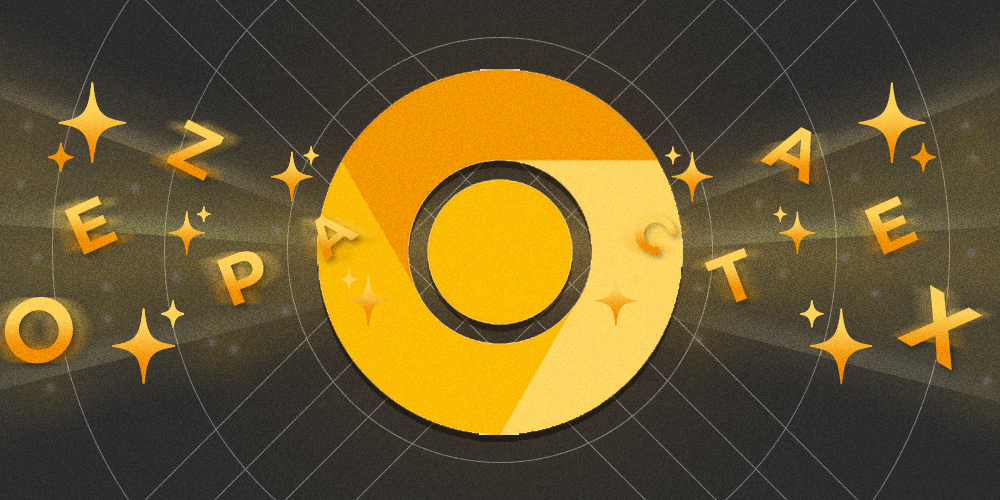
<style>
.page{position:relative;width:1000px;height:500px}
.page>*{position:absolute;margin:0}
.t1{font:68.5px "Montserrat-Bold"}
.t2{font:68.7px "Montserrat-Bold"}
.t3{font:68.8px "Montserrat-Bold"}
.t4{font:54.5px "Montserrat-Bold"}
.t5{font:69px "Montserrat-Bold"}
.t6{font:89.4px "Montserrat-Bold"}
</style>
<div class="page">
<p class="t1" style="left:166px;top:119px;width:59px;height:62px;rotate:27deg">Z</p>
<p class="t2" style="left:760px;top:127px;width:51px;height:58px;rotate:26deg">A</p>
<p class="t3" style="left:64px;top:195px;width:54px;height:60px;rotate:-24deg">E</p>
<p class="t2" style="left:864px;top:196px;width:55px;height:59px;rotate:-24deg">E</p>
<p class="t4" style="left:315px;top:215px;width:44px;height:47px;rotate:141deg">A</p>
<p class="t4" style="left:635px;top:214px;width:42px;height:41px;rotate:39deg">C</p>
<p class="t5" style="left:216px;top:251px;width:48px;height:55px;rotate:-21deg">P</p>
<p class="t2" style="left:704px;top:248px;width:44px;height:55px;rotate:-21deg">T</p>
<p class="t6" style="left:897px;top:284px;width:86px;height:87px;rotate:31deg">X</p>
<p class="t6" style="left:4px;top:297px;width:69px;height:67px;rotate:149deg">O</p>
</div>
